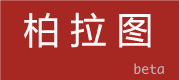
<style>
.page{position:relative;width:179px;height:80px;background:#a72722}
.page>*{position:absolute;margin:0}
.t1{font:36px "MicrosoftYaHei";color:#fdf9f9}
</style>
<div class="page">
<p class="t1" style="left:24px;top:12px;width:127px;height:36px">柏 拉 图</p>
</div>
